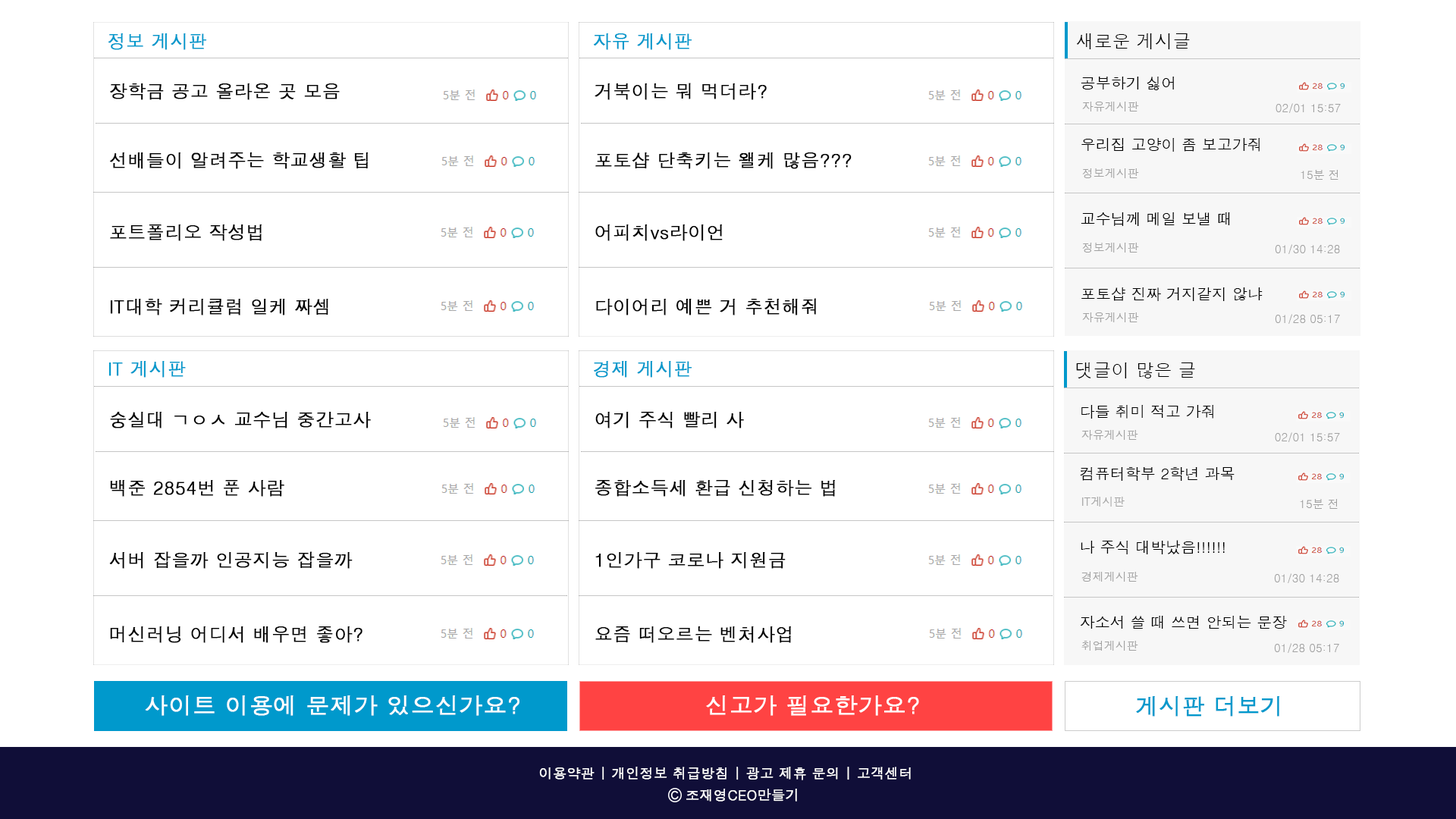
<style>
.page{position:relative;width:1456px;height:819px;background:#ffffff}
.page>*{position:absolute;margin:0}
.t1{font:18.2px "Dotum";color:#0099cc;font-weight:bold}
.t2{font:18.2px "Dotum";color:#000000}
.t3{font:15.2px "Dotum";color:#000000}
.t4{font:18.2px "Dotum";color:#000000;font-weight:bold}
.t5{font:11.4px "Dotum";color:#a1a1a1}
.t6{font:22.7px "Dotum";color:#ffffff;font-weight:bold;scale:1.03 1}
.t7{font:22.7px "Dotum";color:#0099cc;font-weight:bold}
.t8{font:13.6px "Dotum";color:#ffffff;font-weight:bold}
</style>
<div class="page">
<p class="t1" style="left:108px;top:33px;width:99px;height:17px">정보 게시판</p>
<p class="t1" style="left:594px;top:33px;width:98px;height:17px">자유 게시판</p>
<p class="t2" style="left:1076px;top:33px;width:114px;height:16px">새로운 게시글</p>
<p class="t3" style="left:1081px;top:77px;width:93px;height:13px">공부하기 싫어</p>
<p class="t4" style="left:110px;top:83px;width:230px;height:17px">장학금 공고 올라온 곳 모음</p>
<p class="t4" style="left:595px;top:83px;width:172px;height:17px">거북이는 뭐 먹더라?</p>
<p class="t5" style="left:1082px;top:102px;width:57px;height:9px">자유게시판</p>
<p class="t5" style="left:1275px;top:103px;width:66px;height:10px">02/01 15:57</p>
<p class="t3" style="left:1081px;top:138px;width:179px;height:14px">우리집 고양이 좀 보고가줘</p>
<p class="t4" style="left:110px;top:152px;width:259px;height:17px">선배들이 알려주는 학교생활 팁</p>
<p class="t4" style="left:595px;top:152px;width:257px;height:17px">포토샵 단축키는 왤케 많음???</p>
<p class="t5" style="left:1082px;top:168px;width:57px;height:10px">정보게시판</p>
<p class="t5" style="left:1301px;top:170px;width:37px;height:10px">15분 전</p>
<p class="t3" style="left:1081px;top:212px;width:149px;height:14px">교수님께 메일 보낼 때</p>
<p class="t4" style="left:110px;top:224px;width:152px;height:17px">포트폴리오 작성법</p>
<p class="t4" style="left:595px;top:224px;width:128px;height:17px">어피치vs라이언</p>
<p class="t5" style="left:1082px;top:243px;width:57px;height:10px">정보게시판</p>
<p class="t5" style="left:1275px;top:244px;width:65px;height:10px">01/30 14:28</p>
<p class="t3" style="left:1081px;top:287px;width:182px;height:14px">포토샵 진짜 거지같지 않냐</p>
<p class="t4" style="left:110px;top:298px;width:218px;height:17px">IT대학 커리큘럼 일케 짜셈</p>
<p class="t4" style="left:596px;top:298px;width:220px;height:17px">다이어리 예쁜 거 추천해줘</p>
<p class="t5" style="left:1082px;top:312px;width:57px;height:10px">자유게시판</p>
<p class="t5" style="left:1275px;top:314px;width:65px;height:10px">01/28 05:17</p>
<p class="t1" style="left:108px;top:361px;width:78px;height:17px">IT 게시판</p>
<p class="t1" style="left:594px;top:361px;width:98px;height:17px">경제 게시판</p>
<p class="t2" style="left:1076px;top:362px;width:119px;height:16px">댓글이 많은 글</p>
<p class="t4" style="left:110px;top:412px;width:261px;height:16px">숭실대 ㄱㅇㅅ 교수님 중간고사</p>
<p class="t4" style="left:595px;top:412px;width:149px;height:16px">여기 주식 빨리 사</p>
<p class="t3" style="left:1081px;top:405px;width:132px;height:14px">다들 취미 적고 가줘</p>
<p class="t5" style="left:1081px;top:430px;width:57px;height:10px">자유게시판</p>
<p class="t5" style="left:1275px;top:432px;width:65px;height:10px">02/01 15:57</p>
<p class="t3" style="left:1080px;top:467px;width:155px;height:14px">컴퓨터학부 2학년 과목</p>
<p class="t4" style="left:110px;top:480px;width:174px;height:17px">백준 2854번 푼 사람</p>
<p class="t4" style="left:595px;top:480px;width:240px;height:17px">종합소득세 환급 신청하는 법</p>
<p class="t5" style="left:1082px;top:497px;width:43px;height:10px">IT게시판</p>
<p class="t5" style="left:1300px;top:499px;width:38px;height:10px">15분 전</p>
<p class="t3" style="left:1081px;top:540px;width:144px;height:14px">나 주식 대박났음!!!!!!</p>
<p class="t4" style="left:109px;top:551px;width:244px;height:18px">서버 잡을까 인공지능 잡을까</p>
<p class="t4" style="left:595px;top:552px;width:191px;height:17px">1인가구 코로나 지원금</p>
<p class="t5" style="left:1081px;top:572px;width:57px;height:10px">경제게시판</p>
<p class="t5" style="left:1274px;top:573px;width:65px;height:10px">01/30 14:28</p>
<p class="t3" style="left:1080px;top:616px;width:207px;height:13px">자소서 쓸 때 쓰면 안되는 문장</p>
<p class="t4" style="left:110px;top:626px;width:252px;height:17px">머신러닝 어디서 배우면 좋아?</p>
<p class="t4" style="left:595px;top:626px;width:196px;height:17px">요즘 떠오르는 벤처사업</p>
<p class="t5" style="left:1081px;top:641px;width:57px;height:10px">취업게시판</p>
<p class="t5" style="left:1274px;top:643px;width:65px;height:10px">01/28 05:17</p>
<p class="t6" style="left:145px;top:695px;width:374px;height:21px">사이트 이용에 문제가 있으신가요?</p>
<p class="t6" style="left:706px;top:695px;width:213px;height:21px">신고가 필요한가요?</p>
<p class="t7" style="left:1136px;top:696px;width:143px;height:21px">게시판 더보기</p>
<p class="t8" style="left:539px;top:767px;width:372px;height:13px">이용약관 | 개인정보 취급방침 | 광고 제휴 문의 | 고객센터</p>
<p class="t8" style="left:686px;top:789px;width:111px;height:13px">조재영CEO만들기</p>
</div>
